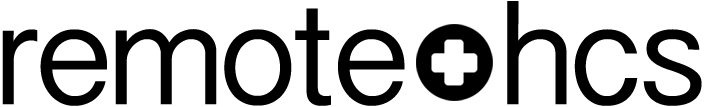
<style>
.page{position:relative;width:704px;height:107px;background:#ffffff}
.page>*{position:absolute;margin:0}
.t1{font:148px "GurmukhiSangamMN";letter-spacing:-0.04em;color:#000000}
</style>
<div class="page">
<p class="t1" style="left:2px;top:1px;width:700px;height:105px">remote   hcs</p>
</div>
